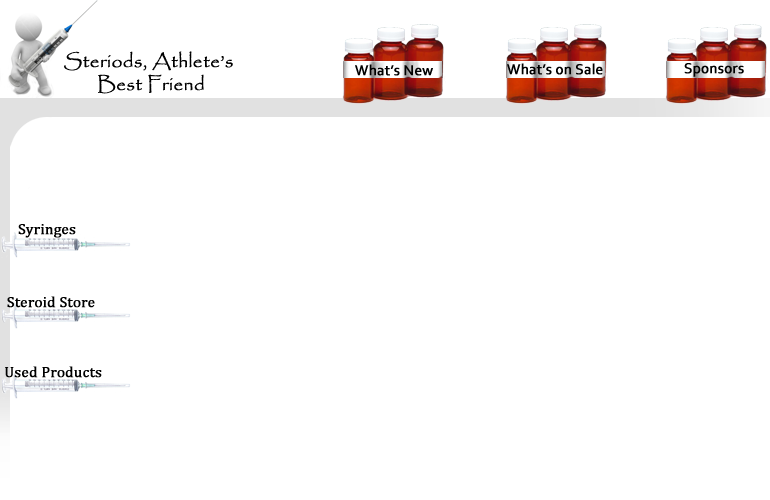
<style>
.page{position:relative;width:770px;height:500px;background:#ffffff}
.page>*{position:absolute;margin:0}
.t1{font:19px "Papyrus-Regular";color:#000000;font-weight:bold}
.t2{font:15px "Corbel";color:#000000;font-weight:bold}
.t3{font:15px "CambriaMath";color:#000000;font-weight:bold}
</style>
<div class="page">
<p class="t1" style="left:64px;top:51px;width:169px;height:43px;text-align:center">Steriods, Athlete’s <br>Best Friend</p>
<p class="t2" style="left:355px;top:64px;width:78px;height:12px">What’s New</p>
<p class="t2" style="left:507px;top:63px;width:96px;height:12px">What’s on Sale</p>
<p class="t2" style="left:684px;top:63px;width:60px;height:14px">Sponsors</p>
<p class="t3" style="left:18px;top:224px;width:58px;height:14px">Syringes</p>
<p class="t3" style="left:7px;top:296px;width:88px;height:12px">Steroid Store</p>
<p class="t3" style="left:5px;top:366px;width:97px;height:12px">Used Products</p>
</div>
